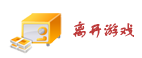
<style>
.page{position:relative;width:142px;height:58px;background:#ffffff}
.page>*{position:absolute;margin:0}
.t1{font:18px "FZSTK--GBK1-0";letter-spacing:-0.14em;color:#bd3a3a;font-weight:bold}
</style>
<div class="page">
<p class="t1" style="left:73px;top:21px;width:61px;height:17px">离开游戏</p>
</div>
